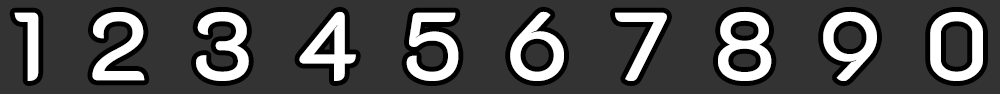
<style>
.page{position:relative;width:1000px;height:94px;background:#333333}
.page>*{position:absolute;margin:0}
.t1{font:96px "K2D-Medium";letter-spacing:0.1em;color:#ffffff;text-transform:uppercase}
</style>
<div class="page">
<p class="t1" style="left:14px;top:11px;width:969px;height:70px">1 2 3 4 5 6 7 8 9 0</p>
</div>
